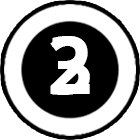
<style>
.page{position:relative;width:140px;height:140px;background:#ffffff}
.page>*{position:absolute;margin:0}
.t1{font:90px "Consolas-Bold";color:#ffffff}
</style>
<div class="page">
<p class="t1" style="left:50px;top:36px;width:40px;height:58px">2</p>
<p class="t1" style="left:51px;top:36px;width:39px;height:59px">3</p>
</div>
